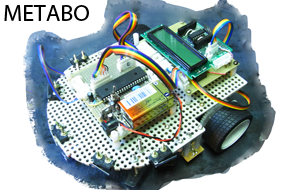
<style>
.page{position:relative;width:283px;height:190px;background:#ffffff}
.page>*{position:absolute;margin:0}
.t1{font:23.7px "MyriadPro-Regular";color:#000000}
</style>
<div class="page">
<p class="t1" style="left:4px;top:5px;width:85px;height:16px">METABO</p>
</div>
